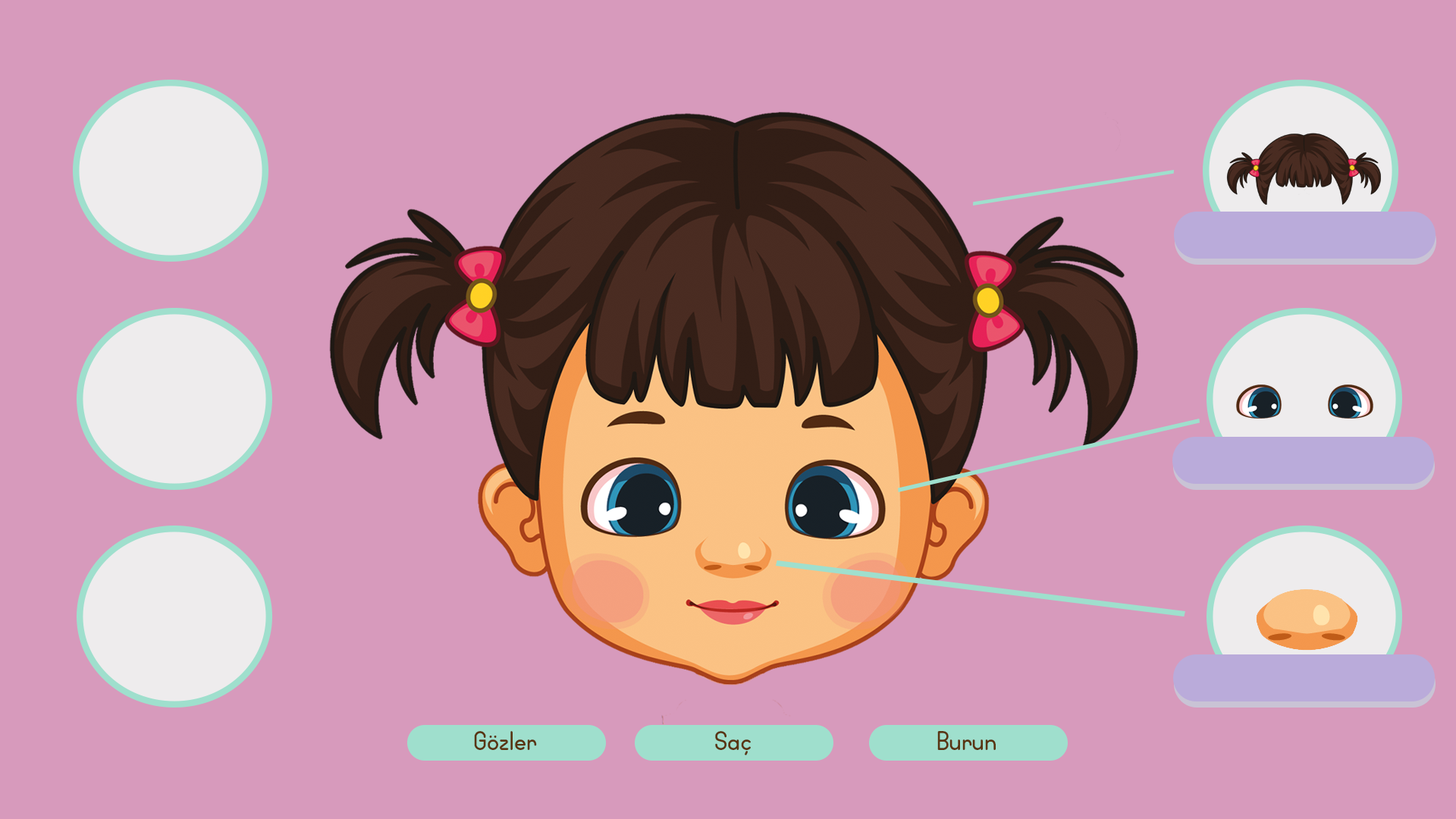
<style>
.page{position:relative;width:1456px;height:819px;background:#d79abc}
.page>*{position:absolute;margin:0}
.t1{font:25.8px "WidaRoundDemo";color:#593512}
</style>
<div class="page">
<p class="t1" style="left:474px;top:731px;width:63px;height:19px">Gözler</p>
<p class="t1" style="left:715px;top:731px;width:36px;height:24px">Saç</p>
<p class="t1" style="left:937px;top:731px;width:59px;height:19px">Burun</p>
</div>
